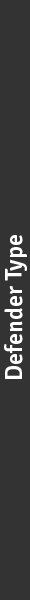
<style>
.page{position:relative;width:30px;height:600px;background:#333333}
.page>*{position:absolute;margin:0}
.t1{font:24px "Signika-Semibold";color:#ffffff}
</style>
<div class="page">
<p class="t1" style="left:4px;top:235px;width:23px;height:144px;rotate:-90deg">Defender Type</p>
</div>
